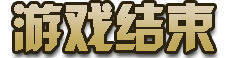
<style>
.page{position:relative;width:225px;height:58px;background:#2c230f}
.page>*{position:absolute;margin:0}
.t1{font:51px "HYk2gj"}
</style>
<div class="page">
<p class="t1" style="left:14px;top:3px;width:200px;height:49px">游戏结束</p>
</div>
